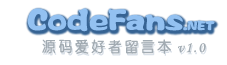
<style>
.page{position:relative;width:227px;height:65px;background:#ffffff}
.page>*{position:absolute;margin:0}
.t1{font:28px "FZPTYJW--GB1-0";color:#93c1f1}
.t2{font:12px "FZPTYJW--GB1-0";color:#93c1f1}
.t3{font:15px "CTZhongYuanSJ";letter-spacing:0.1em;color:#a2abb2}
.t4{font:15px "MonotypeCorsiva";letter-spacing:0.1em;color:#a2abb2}
</style>
<div class="page">
<p class="t1" style="left:27px;top:8px;width:188px;height:24px">CodeFans<span class="t2">.NET</span></p>
<p class="t3" style="left:42px;top:39px;width:164px;height:15px">源码爱好者留言本<span class="t4">v1.0</span></p>
</div>
